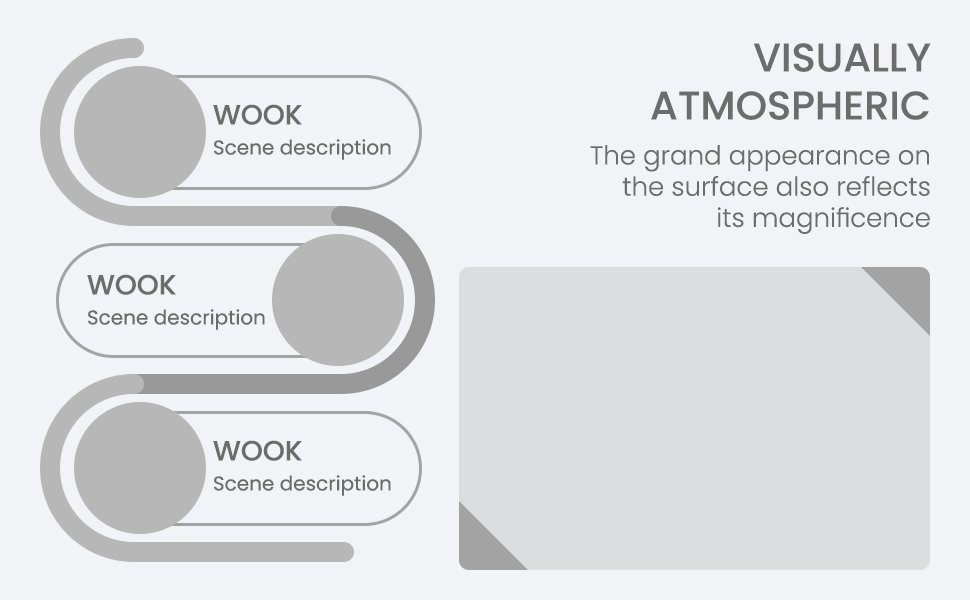
<style>
.page{position:relative;width:970px;height:600px;background:#f2f3f6}
.page>*{position:absolute;margin:0}
.t1{font:40px "Poppins-Medium";color:#6c6c6c}
.t2{font:28px "Poppins-Medium";color:#6c6c6c;text-transform:uppercase}
.t3{font:20px "Poppins-Regular";color:#6c6c6c}
.t4{font:26px "Poppins-Light";color:#6c6c6c}
</style>
<div class="page">
<p class="t1" style="left:651px;top:43px;width:280px;height:77px;text-align:right">VISUALLY<br>ATMOSPHERIC</p>
<p class="t2" style="left:213px;top:104px;width:89px;height:21px">wook</p>
<p class="t3" style="left:214px;top:139px;width:177px;height:21px">Scene description</p>
<p class="t4" style="left:590px;top:145px;width:340px;height:89px;text-align:right">The grand appearance on<br> the surface also reflects<br>its magnificence</p>
<p class="t2" style="left:87px;top:274px;width:89px;height:21px">wook</p>
<p class="t3" style="left:88px;top:309px;width:177px;height:21px">Scene description</p>
<p class="t2" style="left:213px;top:440px;width:89px;height:21px">wook</p>
<p class="t3" style="left:214px;top:475px;width:177px;height:21px">Scene description</p>
</div>
